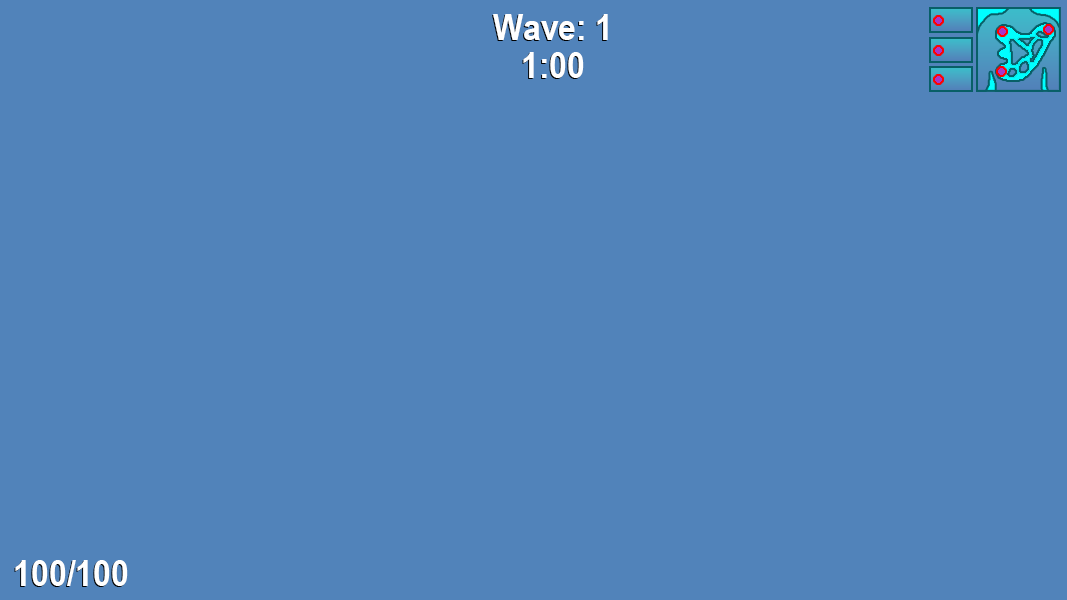
<style>
.page{position:relative;width:1067px;height:600px;background:#5183ba}
.page>*{position:absolute;margin:0}
.t1{font:37px "ArialNarrow-Bold";color:#ffffff;scale:1.05 1}
.t2{font:37px "ArialNarrow-Bold";color:#ffffff;text-transform:uppercase;scale:1.05 1}
</style>
<div class="page">
<p class="t1" style="left:493px;top:14px;width:115px;height:26px"><span class="t2">W</span>ave<span class="t2">: 1</span></p>
<p class="t2" style="left:523px;top:52px;width:61px;height:26px">1:00</p>
<p class="t2" style="left:15px;top:560px;width:113px;height:26px">100/100</p>
</div>
